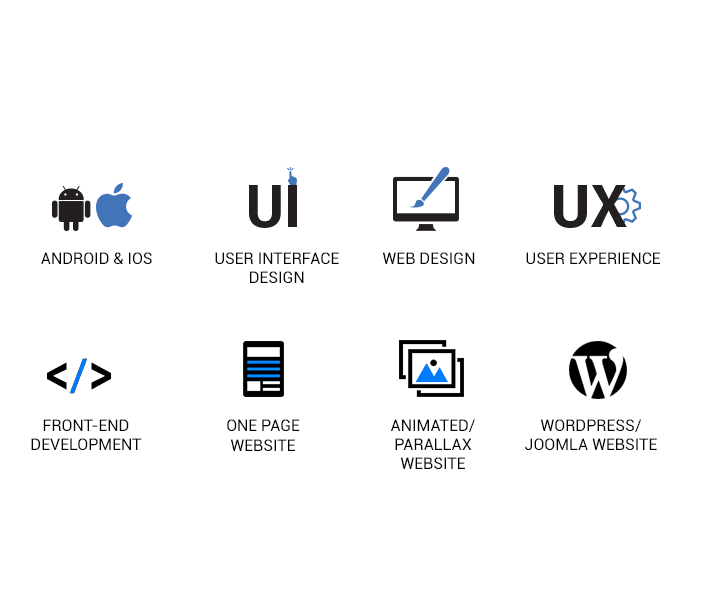
<style>
.page{position:relative;width:708px;height:600px;background:#ffffff}
.page>*{position:absolute;margin:0}
.t1{font:16px "Roboto-Regular";color:#040404}
</style>
<div class="page">
<p class="t1" style="left:41px;top:252px;width:111px;height:12px">ANDROID &amp; IOS</p>
<p class="t1" style="left:215px;top:252px;width:124px;height:31px;text-align:center">USER INTERFACE<br>DESIGN</p>
<p class="t1" style="left:382px;top:252px;width:93px;height:12px">WEB DESIGN</p>
<p class="t1" style="left:526px;top:252px;width:134px;height:12px">USER EXPERIENCE</p>
<p class="t1" style="left:31px;top:419px;width:111px;height:31px;text-align:center">FRONT-END<br>DEVELOPMENT</p>
<p class="t1" style="left:227px;top:419px;width:73px;height:32px;text-align:center">ONE PAGE<br>WEBSITE</p>
<p class="t1" style="left:391px;top:419px;width:84px;height:50px;text-align:center">ANIMATED/<br>PARALLAX<br>WEBSITE</p>
<p class="t1" style="left:525px;top:419px;width:132px;height:31px;text-align:center">WORDPRESS/<br>JOOMLA WEBSITE</p>
</div>
